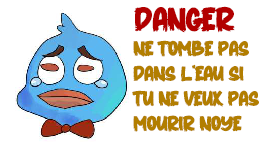
<style>
.page{position:relative;width:270px;height:142px;background:#ffffff}
.page>*{position:absolute;margin:0}
.t1{font:33.3px "THORN";color:#b20000}
.t2{font:20.8px "THORN";color:#b27e00}
</style>
<div class="page">
<p class="t1" style="left:134px;top:6px;width:101px;height:27px">Danger</p>
<p class="t2" style="left:132px;top:40px;width:127px;height:92px">Ne tombe pas<br>dans l'eau si<br>tu ne veux pas<br>mourir noye</p>
</div>
